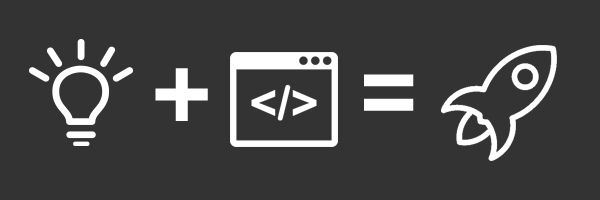
<style>
.page{position:relative;width:600px;height:200px;background:#333333}
.page>*{position:absolute;margin:0}
.t1{font:150px "BebasNeue";color:#ffffff}
</style>
<div class="page">
<p class="t1" style="left:155px;top:68px;width:53px;height:53px">+</p>
<p class="t1" style="left:364px;top:74px;width:50px;height:37px">=</p>
</div>
